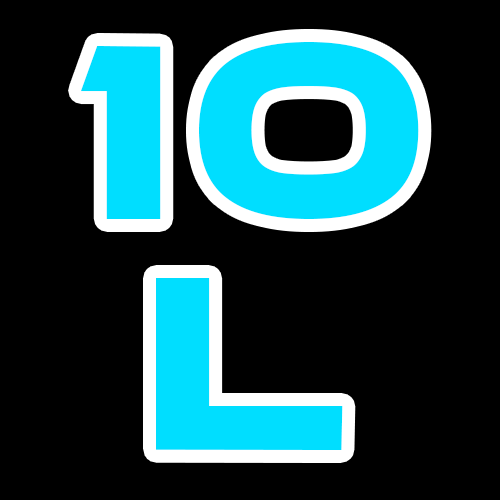
<style>
.page{position:relative;width:500px;height:500px;background:#000000}
.page>*{position:absolute;margin:0}
.t1{font:300px "elasisrg";color:#00deff}
</style>
<div class="page">
<p class="t1" style="left:81px;top:42px;width:338px;height:177px">10</p>
<p class="t1" style="left:156px;top:278px;width:187px;height:172px">L</p>
</div>
